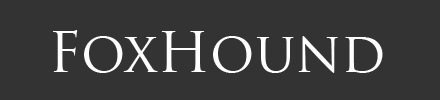
<style>
.page{position:relative;width:440px;height:100px;background:#333333}
.page>*{position:absolute;margin:0}
.t1{font:55px "TrajanPro-Regular";color:#fefefe}
</style>
<div class="page">
<p class="t1" style="left:53px;top:30px;width:330px;height:43px">FoxHound</p>
</div>
